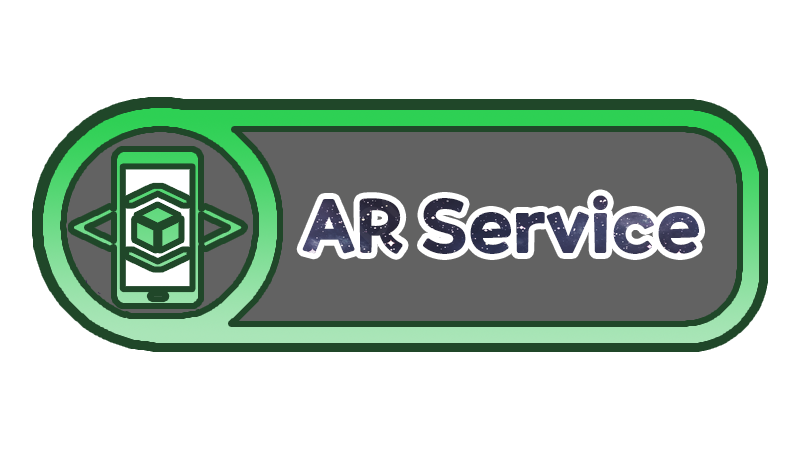
<style>
.page{position:relative;width:800px;height:450px;background:#ffffff}
.page>*{position:absolute;margin:0}
.t1{font:72px "ONEMobilePOPOTFRegular"}
</style>
<div class="page">
<p class="t1" style="left:302px;top:195px;width:397px;height:59px">AR Service</p>
</div>
